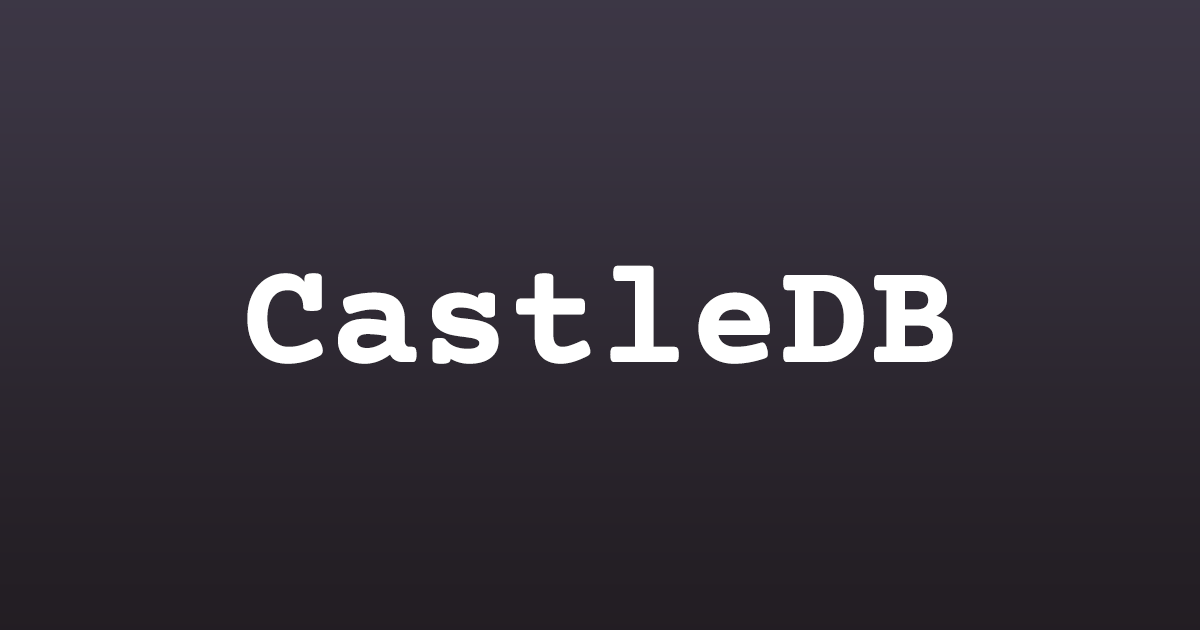
<style>
.page{position:relative;width:1200px;height:630px}
.page>*{position:absolute;margin:0}
.t1{font:150px "CourierPrime-Bold";color:#ffffff}
</style>
<div class="page">
<p class="t1" style="left:247px;top:265px;width:706px;height:99px">CastleDB</p>
</div>
